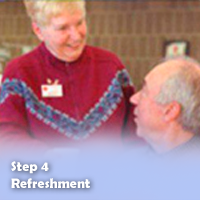
<style>
.page{position:relative;width:200px;height:200px}
.page>*{position:absolute;margin:0}
.t1{font:14.1px "BerlinSansFBDemi-Bold"}
.t2{font:14.1px "BerlinSansFBDemi-Bold";color:#ffffff}
</style>
<div class="page">
<p class="t1" style="left:11px;top:161px;width:85px;height:30px">Step 2<br>Mini-Physical</p>
<p class="t2" style="left:11px;top:161px;width:79px;height:27px">Step 4<br>Refreshment</p>
</div>
